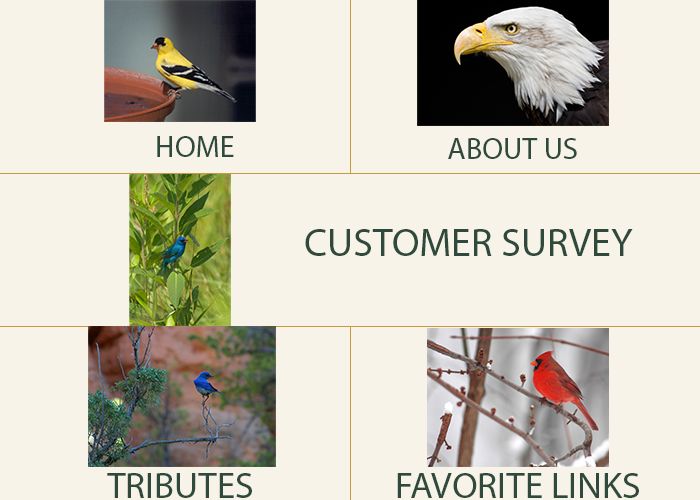
<style>
.page{position:relative;width:700px;height:500px;background:#f7f3e8}
.page>*{position:absolute;margin:0}
.t1{font:30px "MyriadPro-Regular";color:#2f4a3c}
.t2{font:40px "MyriadPro-Regular";color:#2f4a3c}
.t3{font:37.1px "MyriadPro-Regular";color:#2f4a3c}
</style>
<div class="page">
<p class="t1" style="left:157px;top:136px;width:77px;height:21px">HOME</p>
<p class="t1" style="left:448px;top:138px;width:129px;height:21px">ABOUT US</p>
<p class="t2" style="left:305px;top:229px;width:328px;height:27px">CUSTOMER SURVEY</p>
<p class="t3" style="left:107px;top:473px;width:145px;height:25px">TRIBUTES</p>
<p class="t3" style="left:397px;top:473px;width:242px;height:25px">FAVORITE LINKS</p>
</div>
